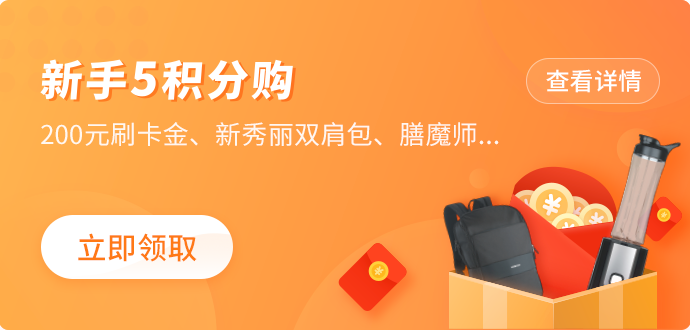
<style>
.page{position:relative;width:690px;height:330px}
.page>*{position:absolute;margin:0}
.t1{font:24px "SourceHanSansCN-Medium";letter-spacing:0.01em;color:#ffffff}
.t2{font:26px "SourceHanSansCN-Regular";letter-spacing:0.01em;color:#ffffff}
.t3{font:30px "SourceHanSansCN-Medium";letter-spacing:0.01em;color:#ff7916}
</style>
<div class="page">
<p class="t1" style="left:546px;top:69px;width:95px;height:24px">查看详情</p>
<p class="t2" style="left:41px;top:122px;width:458px;height:25px;opacity:0.9">200元刷卡金、新秀丽双肩包、膳魔师...</p>
<p class="t3" style="left:78px;top:233px;width:119px;height:29px">立即领取</p>
</div>
